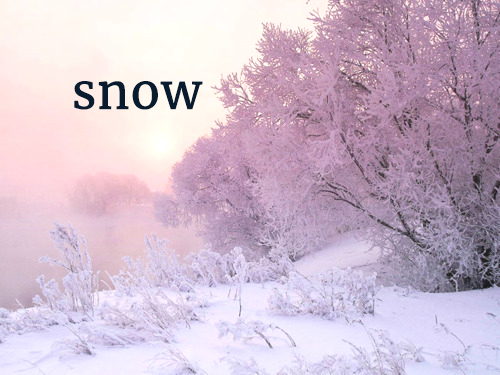
<style>
.page{position:relative;width:500px;height:375px}
.page>*{position:absolute;margin:0}
.t1{font:48px "Merriweather-Regular";color:#091b2f;font-weight:bold}
</style>
<div class="page">
<p class="t1" style="left:74px;top:81px;width:129px;height:29px">snow</p>
</div>
